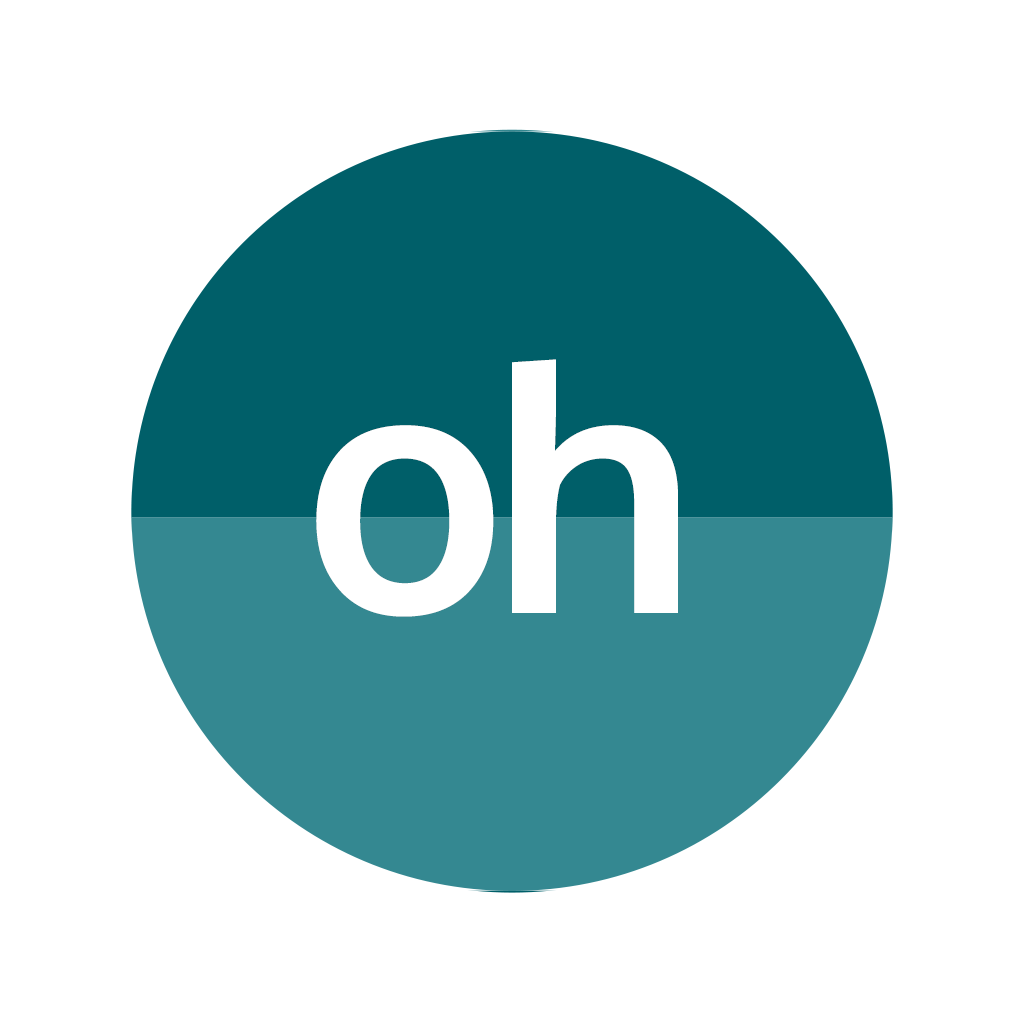
<style>
.page{position:relative;width:1024px;height:1024px;background:#ffffff}
.page>*{position:absolute;margin:0}
.t1{font:341.3px "Oxygen-Bold";letter-spacing:-0.047em;color:#ffffff}
</style>
<div class="page">
<p class="t1" style="left:316px;top:359px;width:362px;height:258px">oh</p>
</div>
